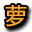
<style>
.page{position:relative;width:32px;height:32px;background:#ffffff}
.page>*{position:absolute;margin:0}
.t1{font:23.6px "SimHei";letter-spacing:-0.06em;color:#ffaa31}
</style>
<div class="page">
<p class="t1" style="left:5px;top:4px;width:22px;height:23px">萝</p>
</div>
